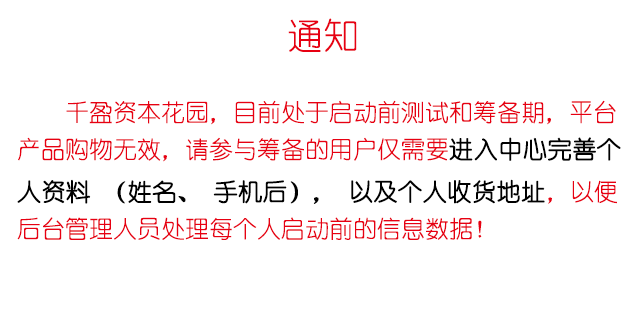
<style>
.page{position:relative;width:640px;height:320px;background:#ffffff}
.page>*{position:absolute;margin:0}
.t1{font:36px "YouYuan";color:#e70012}
.t2{font:24px/5.3px "YouYuan";color:#e70012}
.t3{font:24px/5.3px "YouYuan";color:#000000;font-weight:bold}
</style>
<div class="page">
<p class="t1" style="left:288px;top:18px;width:69px;height:34px">通知</p>
<p class="t1" style="left:288px;top:18px;width:69px;height:34px">通知</p>
<p class="t2" style="left:17px;top:100px;width:604px;height:140px">千盈资本花园，目前处于启动前测试和筹备期，平台<br><br><br><br><br><br><br>产品购物无效，请参与筹备的用户仅需要<span class="t3">进入中心完善个<br><br><br><br><br><br><br><br>人资料（姓名、手机后），以及个人收货地址</span>，以便<br><br><br><br><br><br><br>后台管理人员处理每个人启动前的信息数据！</p>
</div>
